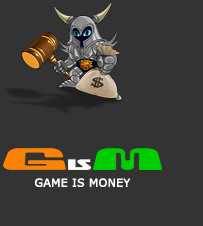
<style>
.page{position:relative;width:203px;height:226px;background:#333333}
.page>*{position:absolute;margin:0}
.t1{font:11px "Verdana";color:#ffffff;font-weight:bold}
</style>
<div class="page">
<p class="t1" style="left:34px;top:178px;width:97px;height:9px">GAME IS MONEY</p>
</div>
